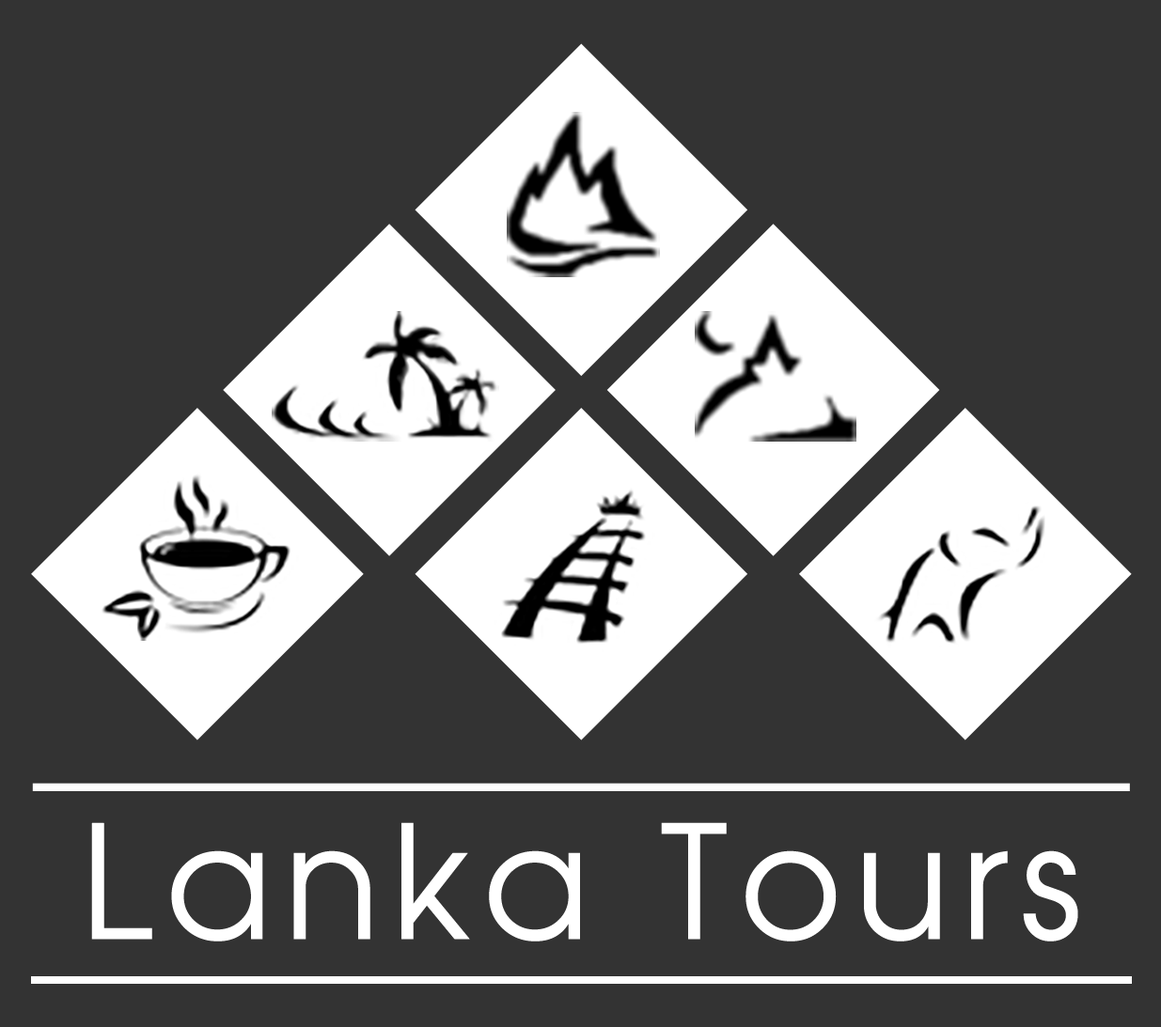
<style>
.page{position:relative;width:1161px;height:1027px;background:#333333}
.page>*{position:absolute;margin:0}
.t1{font:156.6px "Madhura";letter-spacing:0.05em;color:#ffffff;font-weight:bold}
</style>
<div class="page">
<p class="t1" style="left:91px;top:822px;width:987px;height:120px">Lanka Tours</p>
</div>
